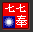
<style>
.page{position:relative;width:33px;height:32px;background:#f20000}
.page>*{position:absolute;margin:0}
.t1{font:10.4px "SimSun";color:#ffffff}
.t2{font:11.7px "SimSun";color:#ffffff}
</style>
<div class="page">
<p class="t1" style="left:5px;top:4px;width:21px;height:8px">七七</p>
<p class="t2" style="left:16px;top:15px;width:11px;height:12px">奉</p>
</div>
